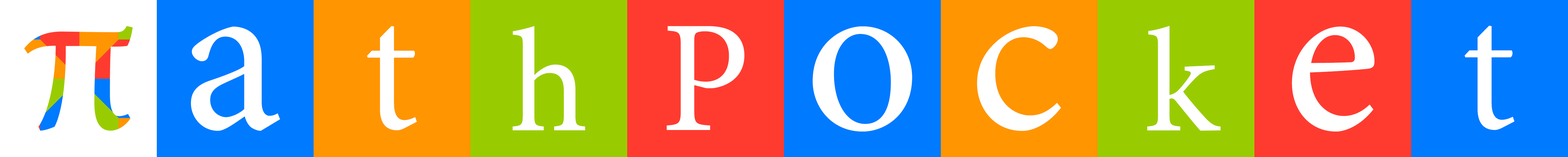
<style>
.page{position:relative;width:1568px;height:157px;background:#007aff}
.page>*{position:absolute;margin:0}
.t1{font:176.9px "MinionPro-Regular";color:#ffffff}
.t2{font:146.1px "MinionPro-Regular";color:#ffffff}
.t3{font:159.6px "MinionPro-Regular";color:#ffffff}
.t4{font:227.7px "MinionPro-Regular";color:#ffffff}
.t5{font:226.4px "MinionPro-Regular";color:#ffffff}
.t6{font:146.5px "MinionPro-Regular";color:#ffffff}
.t7{font:227px "MinionPro-Regular";color:#ffffff}
</style>
<div class="page">
<p class="t1" style="left:367px;top:26px;width:50px;height:104px">t</p>
<p class="t2" style="left:512px;top:26px;width:73px;height:104px">h</p>
<p class="t3" style="left:667px;top:26px;width:77px;height:104px">P</p>
<p class="t4" style="left:813px;top:26px;width:99px;height:105px">o</p>
<p class="t5" style="left:977px;top:26px;width:84px;height:105px">c</p>
<p class="t6" style="left:1147px;top:26px;width:74px;height:104px">k</p>
<p class="t7" style="left:1292px;top:26px;width:83px;height:105px">e</p>
<p class="t1" style="left:1465px;top:26px;width:49px;height:104px">t</p>
</div>
